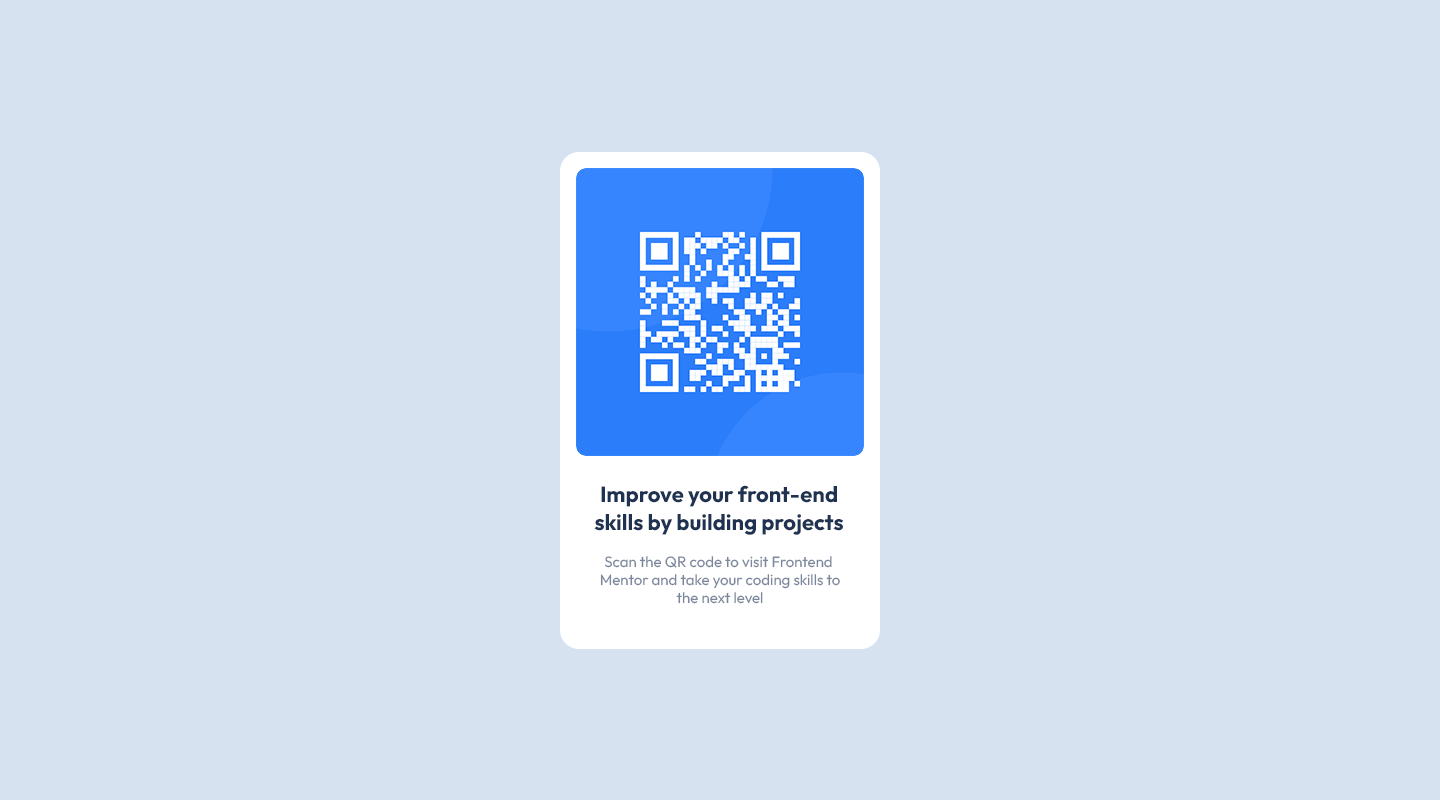
<style>
.page{position:relative;width:1440px;height:800px;background:#d6e2f0}
.page>*{position:absolute;margin:0}
.t1{font:22px/28px "Outfit-Bold";color:#1f3251}
.t2{font:15px "Outfit-Regular";color:#7b879d}
</style>
<div class="page">
<p class="t1" style="left:594px;top:485px;width:250px;height:50px;text-align:center">Improve your front-end<br>skills by building projects</p>
<p class="t2" style="left:600px;top:556px;width:240px;height:48px;text-align:center">Scan the QR code to visit Frontend <br>Mentor and take your coding skills to<br>the next level</p>
</div>
